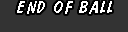
<style>
.page{position:relative;width:128px;height:32px;background:#333333}
.page>*{position:absolute;margin:0}
.t1{font:18px "DomDiagonalBT-Regular";letter-spacing:0.075em;color:#ffffff}
</style>
<div class="page">
<p class="t1" style="left:17px;top:1px;width:95px;height:13px">END OF BALL</p>
</div>
